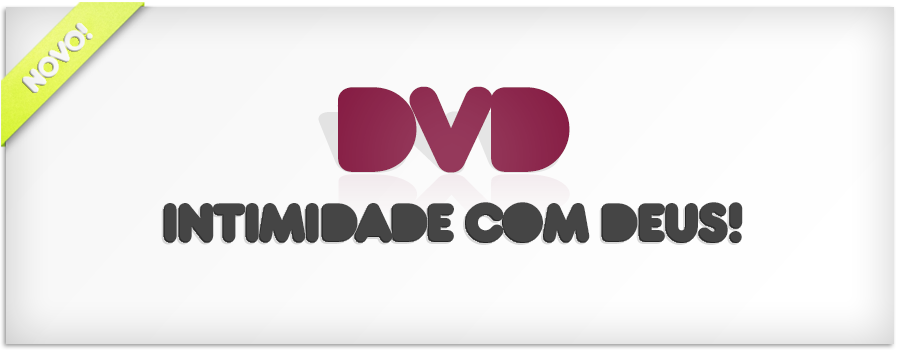
<style>
.page{position:relative;width:900px;height:350px}
.page>*{position:absolute;margin:0}
.t1{font:127px "BarutaBlack";letter-spacing:-0.05em;color:#8e2b50;text-transform:uppercase}
.t2{font:98.8px "BarutaBlack";letter-spacing:-0.05em;color:#903053;text-transform:uppercase;scale:1.29 1}
.t3{font:58px "BarutaBlack";letter-spacing:-0.05em;color:#454545;text-transform:uppercase}
</style>
<div class="page">
<p class="t1" style="left:337px;top:86px;width:233px;height:87px">DVD</p>
<p class="t2" style="left:318px;top:111px;width:243px;height:63px">DVD</p>
<p class="t3" style="left:163px;top:202px;width:580px;height:41px">INTIMIDADE COM DEUS!</p>
</div>
